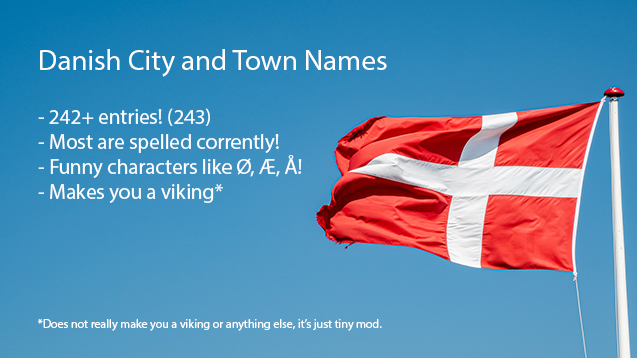
<style>
.page{position:relative;width:637px;height:358px}
.page>*{position:absolute;margin:0}
.t1{font:21px "MyriadPro-Regular";color:#ffffff}
.t2{font:29px "MyriadPro-Regular";color:#ffffff}
.t3{font:12px "MyriadPro-Regular";color:#ffffff}
</style>
<div class="page">
<p class="t1" style="left:38px;top:49px;width:349px;height:154px"><span class="t2">Danish City and Town Names<br><br></span>- 242+ entries! (243)<br>- Most are spelled corrently!<br>- Funny characters like Ø, Æ, Å!<br>- Makes you a viking*<br><br><br><br>*Does not really make you a viking at all</p>
<p class="t3" style="left:38px;top:319px;width:344px;height:12px">*Does not really make you a viking or anything else, it’s just tiny mod.<br><span class="t1"><br><br>*Does not really make you a viking at all</span></p>
</div>
